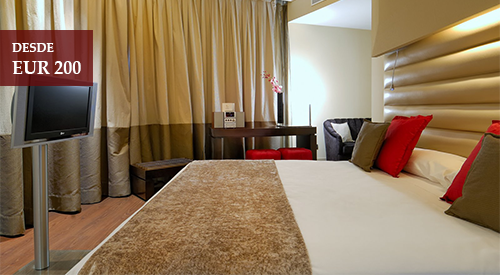
<style>
.page{position:relative;width:500px;height:275px}
.page>*{position:absolute;margin:0}
.t1{font:18px "PalatinoLinotype-Bold";color:#ffffff}
.t2{font:12px "PalatinoLinotype-Bold";color:#ffffff}
</style>
<div class="page">
<p class="t1" style="left:12px;top:43px;width:69px;height:31px"><span class="t2">DESDE<br></span>EUR 200</p>
</div>
